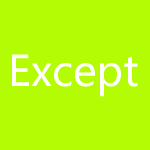
<style>
.page{position:relative;width:150px;height:150px;background:#b3fc03}
.page>*{position:absolute;margin:0}
.t1{font:41.7px "MicrosoftYaHei";color:#ffffff}
</style>
<div class="page">
<p class="t1" style="left:12px;top:54px;width:126px;height:43px">Except</p>
</div>
